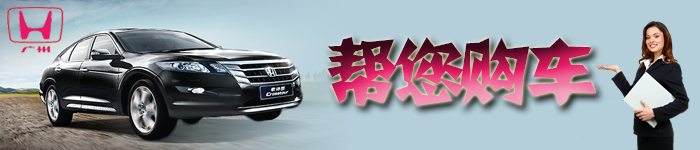
<style>
.page{position:relative;width:700px;height:150px;background:#b4cfda}
.page>*{position:absolute;margin:0}
.t1{font:72px "FZJZJW--GB1-0";letter-spacing:-0.075em}
</style>
<div class="page">
<p class="t1" style="left:327px;top:37px;width:270px;height:70px">帮您购车</p>
</div>
